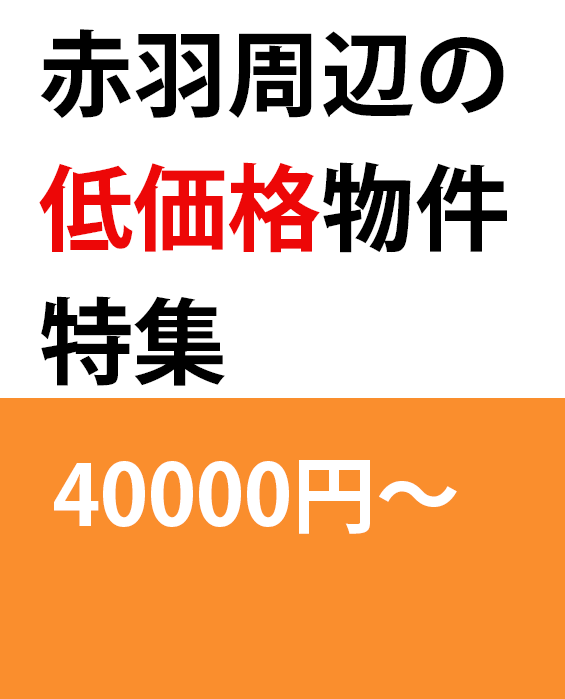
<style>
.page{position:relative;width:565px;height:699px;background:#ffffff}
.page>*{position:absolute;margin:0}
.t1{font:94px/134px "KozGoPr6N-Bold";color:#000000}
.t2{font:94px/134px "KozGoPr6N-Bold";color:#ed0707}
.t3{font:94px "KozGoPr6N-Bold";color:#000000}
.t4{font:72px "KozGoPr6N-Bold";color:#000000}
.t5{font:84px "KozGoPr6N-Bold";color:#ffffff}
</style>
<div class="page">
<p class="t1" style="left:39px;top:29px;width:468px;height:357px">赤羽周辺の<br><span class="t2">低価格</span>物件<br>特集<br><br><span class="t3">物件特集<br></span><span class="t4"><br><br><br><br><br><br><br><br><br><br><br>集</span></p>
<p class="t5" style="left:54px;top:460px;width:403px;height:74px">40000円～</p>
</div>
